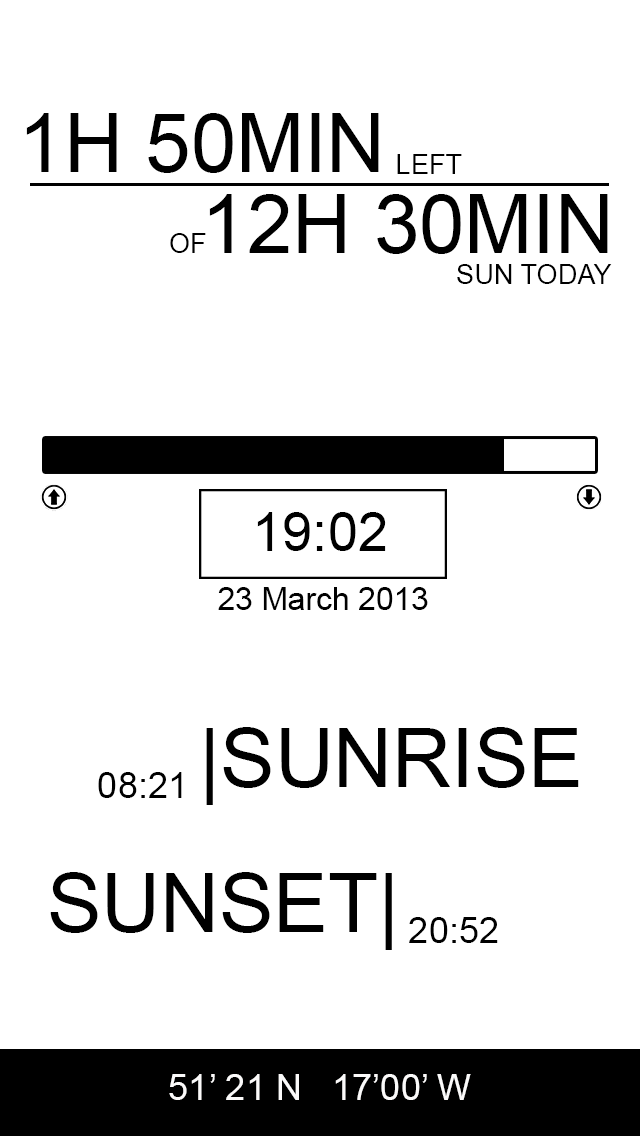
<style>
.page{position:relative;width:640px;height:1136px;background:#ffffff}
.page>*{position:absolute;margin:0}
.t1{font:81.5px "ArialMT";color:#000000;text-transform:uppercase}
.t2{font:27.2px "ArialMT";color:#000000;text-transform:uppercase}
.t3{font:54.3px "ArialMT";color:#000000;text-transform:uppercase}
.t4{font:31.7px "ArialMT";color:#000000}
.t5{font:36.2px "ArialMT";color:#000000;text-transform:uppercase}
.t6{font:36.2px "ArialMT";color:#fbfafa;text-transform:uppercase}
</style>
<div class="page">
<p class="t1" style="left:26px;top:113px;width:353px;height:60px">1h 50min</p>
<p class="t2" style="left:397px;top:154px;width:65px;height:20px">left</p>
<p class="t1" style="left:209px;top:194px;width:399px;height:60px">12h 30min</p>
<p class="t2" style="left:170px;top:233px;width:36px;height:20px">of</p>
<p class="t2" style="left:457px;top:264px;width:155px;height:20px">sun today</p>
<p class="t3" style="left:257px;top:512px;width:129px;height:39px">19:02</p>
<p class="t4" style="left:218px;top:587px;width:210px;height:23px">23 March 2013</p>
<p class="t1" style="left:206px;top:727px;width:373px;height:78px">|Sunrise</p>
<p class="t5" style="left:98px;top:772px;width:84px;height:26px">08:21</p>
<p class="t1" style="left:50px;top:872px;width:342px;height:78px">Sunset|</p>
<p class="t5" style="left:409px;top:917px;width:89px;height:26px">20:52</p>
<p class="t6" style="left:169px;top:1074px;width:302px;height:26px">51’ 21 N   17’00’ W</p>
</div>
